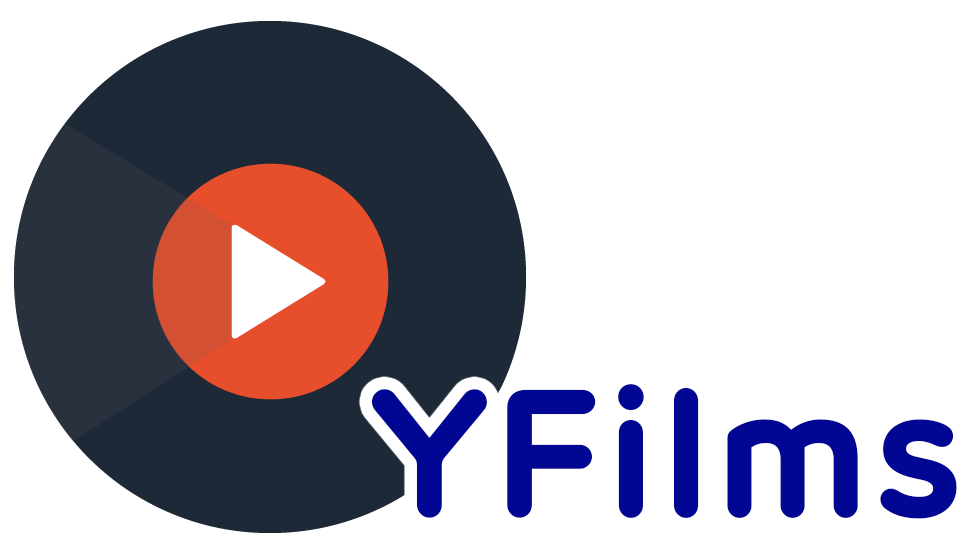
<style>
.page{position:relative;width:980px;height:551px;background:#ffffff}
.page>*{position:absolute;margin:0}
.t1{font:180px "Rubrik-SemiBold";letter-spacing:0.02em;color:#010792}
</style>
<div class="page">
<p class="t1" style="left:371px;top:384px;width:586px;height:135px">YFilms</p>
</div>
